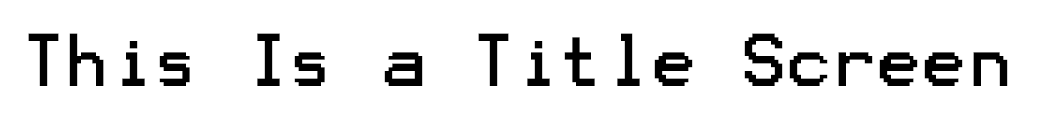
<style>
.page{position:relative;width:1044px;height:122px;background:#ffffff}
.page>*{position:absolute;margin:0}
.t1{font:60px "Terminal";color:#000000}
</style>
<div class="page">
<p class="t1" style="left:28px;top:33px;width:980px;height:53px">This Is a Title Screen</p>
</div>
